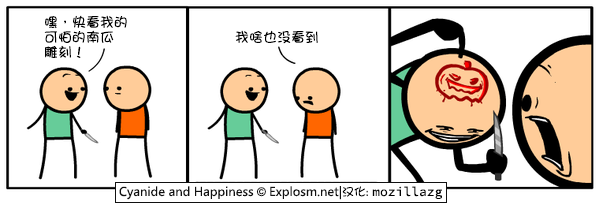
<style>
.page{position:relative;width:599px;height:205px;background:#ffffff}
.page>*{position:absolute;margin:0}
.t1{font:14px/15px "DFGirl";color:#000000}
.t2{font:14px "DFGirl";color:#000000}
</style>
<div class="page">
<p class="t1" style="left:44px;top:15px;width:83px;height:43px">嘿，快看我的<br>可怕的南瓜<br>雕刻！</p>
<p class="t2" style="left:235px;top:30px;width:83px;height:14px">我啥也没看到</p>
</div>
